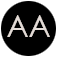
<style>
.page{position:relative;width:57px;height:57px;background:#000000}
.page>*{position:absolute;margin:0}
.t1{font:30px "STHeitiSC-Light";color:#e3dbd6}
</style>
<div class="page">
<p class="t1" style="left:7px;top:15px;width:43px;height:22px">AA</p>
</div>
